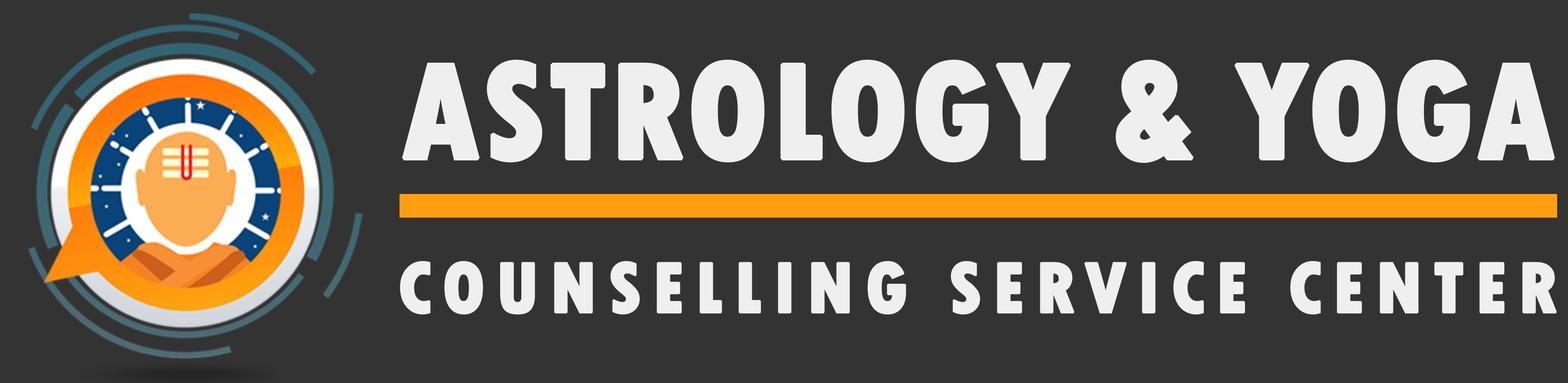
<style>
.page{position:relative;width:1568px;height:383px;background:#333333}
.page>*{position:absolute;margin:0}
.t1{font:144.1px "TwCenMT-CondensedExtraBold";color:#efefef;text-transform:uppercase;font-weight:bold}
.t2{font:76px "TwCenMT-CondensedExtraBold";letter-spacing:0.12em;color:#efefef;text-transform:uppercase;font-weight:bold}
</style>
<div class="page">
<p class="t1" style="left:402px;top:60px;width:1153px;height:103px">Astrology &amp; Yoga</p>
<p class="t2" style="left:400px;top:260px;width:1157px;height:55px">Counselling Service Center</p>
</div>
